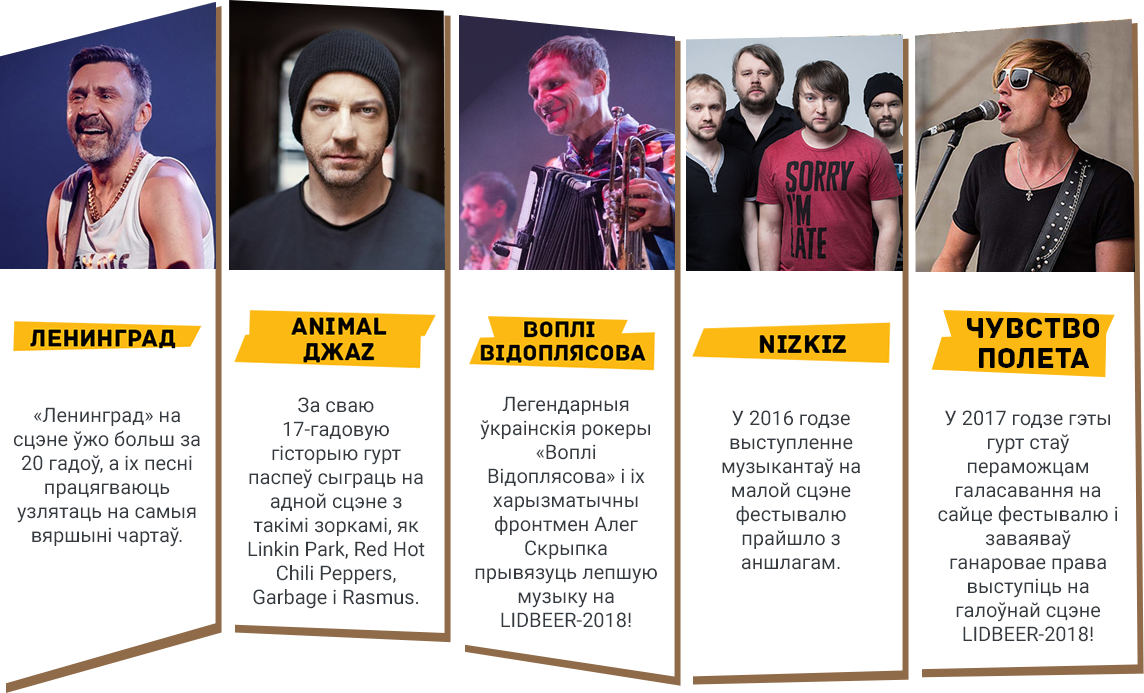
<style>
.page{position:relative;width:1144px;height:693px;background:#ffffff}
.page>*{position:absolute;margin:0}
.t1{font:20px "Roboto-Regular";color:#343a40}
</style>
<div class="page">
<p class="t1" style="left:248px;top:397px;width:177px;height:212px;text-align:center">За сваю 17-гадовую гісторыю гурт паспеў сыграць на адной сцэне з такімі зоркамі, як Linkin Park, Red Hot Chili Peppers, Garbage і Rasmus.</p>
<p class="t1" style="left:475px;top:396px;width:182px;height:232px;text-align:center">Легендарныя ўкраінскія рокеры «Воплі Відоплясова» і іх харызматычны фронтмен Алег Скрыпка прывязуць лепшую музыку на LIDBEER-2018!</p>
<p class="t1" style="left:14px;top:407px;width:186px;height:140px;text-align:center">«Ленинград» на сцэне ўжо больш за 20 гадоў, а іх песні працягваюць узлятаць на самыя вяршыні чартаў.</p>
<p class="t1" style="left:722px;top:410px;width:138px;height:160px;text-align:center">У 2016 годзе выступленне музыкантаў на малой сцэне фестывалю прайшло з аншлагам.</p>
<p class="t1" style="left:938px;top:410px;width:180px;height:232px;text-align:center">У 2017 годзе гэты гурт стаў пераможцам галасавання на сайце фестывалю і заваяваў ганаровае права выступіць на галоўнай сцэне LIDBEER-2018!</p>
</div>
